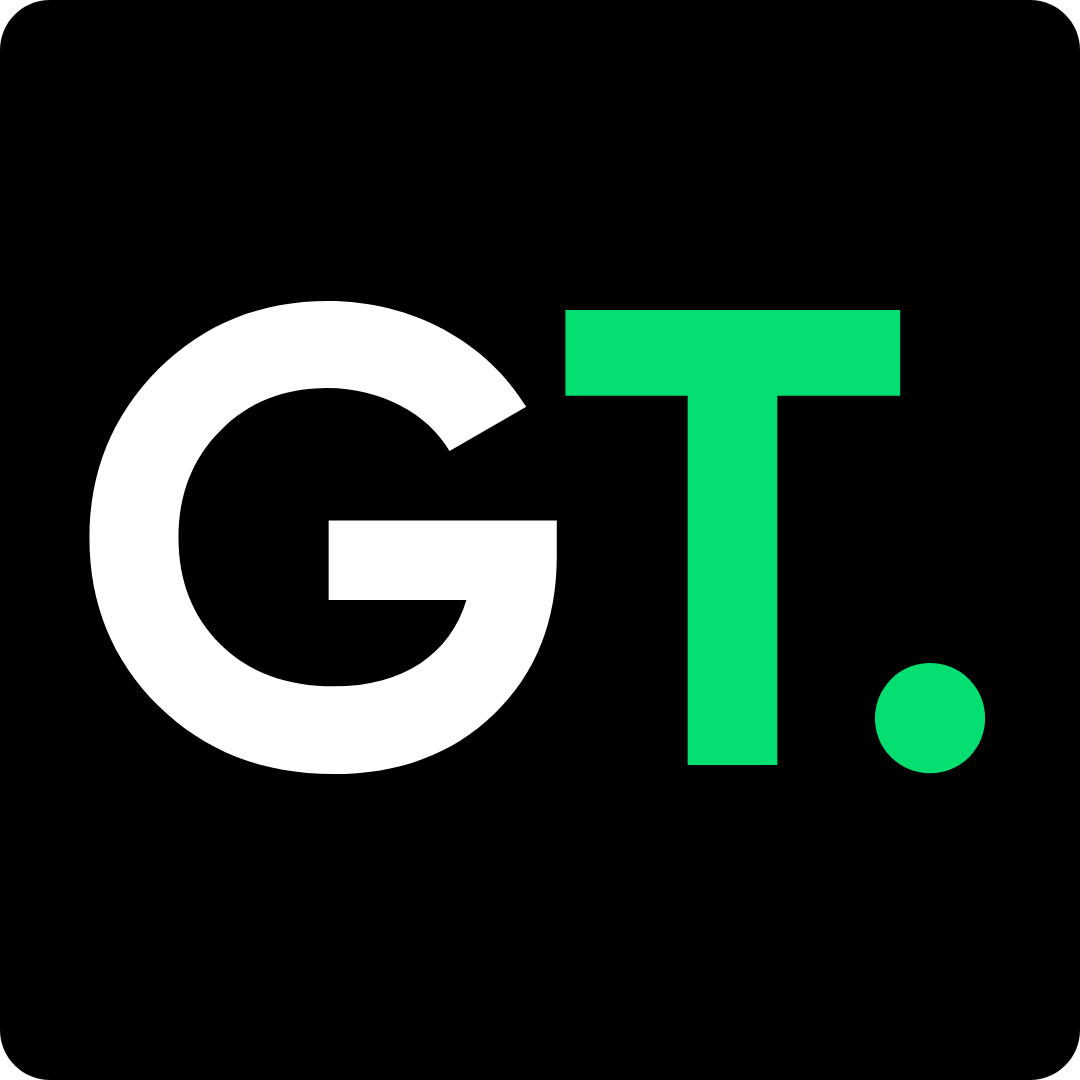
<style>
.page{position:relative;width:1080px;height:1080px;background:#000000}
.page>*{position:absolute;margin:0}
.t1{font:650px "SVN-GilroyBold";color:#ffffff}
.t2{font:650px "SVN-GilroyBold";color:#05df72}
</style>
<div class="page">
<p class="t1" style="left:89px;top:300px;width:468px;height:475px">G</p>
<p class="t2" style="left:565px;top:310px;width:426px;height:469px">T.</p>
</div>
